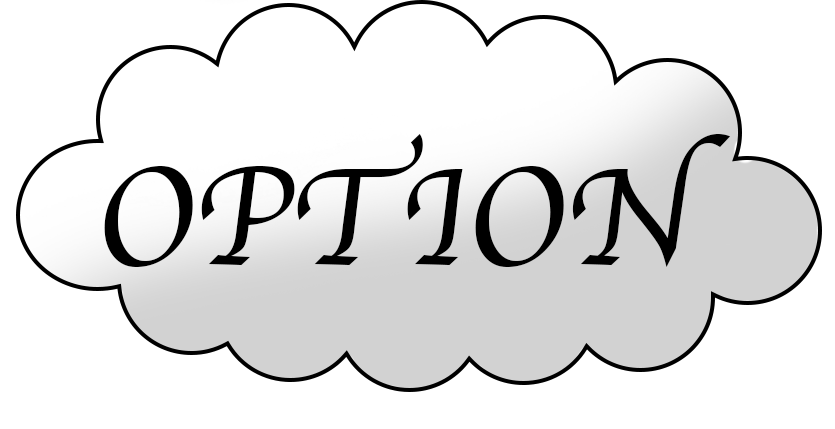
<style>
.page{position:relative;width:835px;height:429px;background:#ffffff}
.page>*{position:absolute;margin:0}
.t1{font:144px "Apple-Chancery";color:#000000}
</style>
<div class="page">
<p class="t1" style="left:104px;top:134px;width:627px;height:133px">OPTION</p>
</div>
